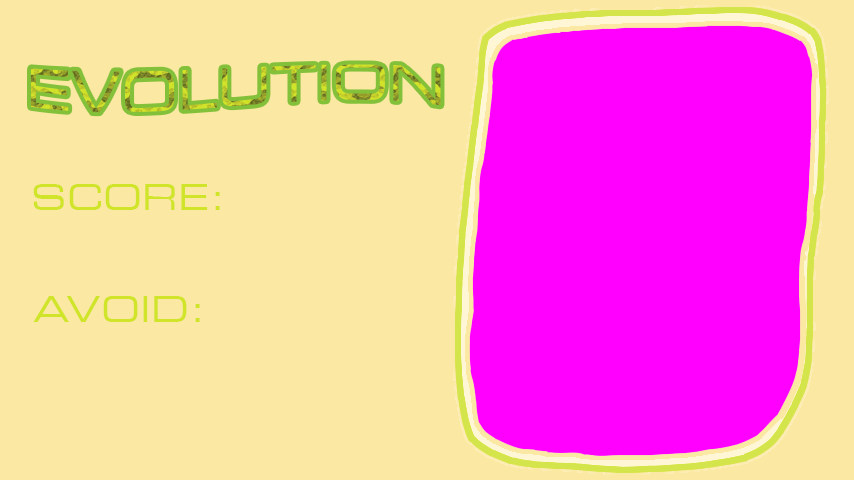
<style>
.page{position:relative;width:854px;height:480px;background:#fbe8a3}
.page>*{position:absolute;margin:0}
.t1{font:52px "EurostileExtended#2"}
.t2{font:36px "EurostileExtended#2";color:#d0e52a}
</style>
<div class="page">
<p class="t1" style="left:31px;top:64px;width:410px;height:49px">EVOLUTION</p>
<p class="t2" style="left:33px;top:184px;width:187px;height:26px">SCORE:</p>
<p class="t2" style="left:33px;top:296px;width:167px;height:26px">AVOID:</p>
</div>
